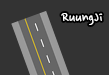
<style>
.page{position:relative;width:109px;height:75px;background:#333333}
.page>*{position:absolute;margin:0}
.t1{font:16px "NanumPen";color:#ffffff}
</style>
<div class="page">
<p class="t1" style="left:61px;top:13px;width:42px;height:12px">RuungJi</p>
</div>
